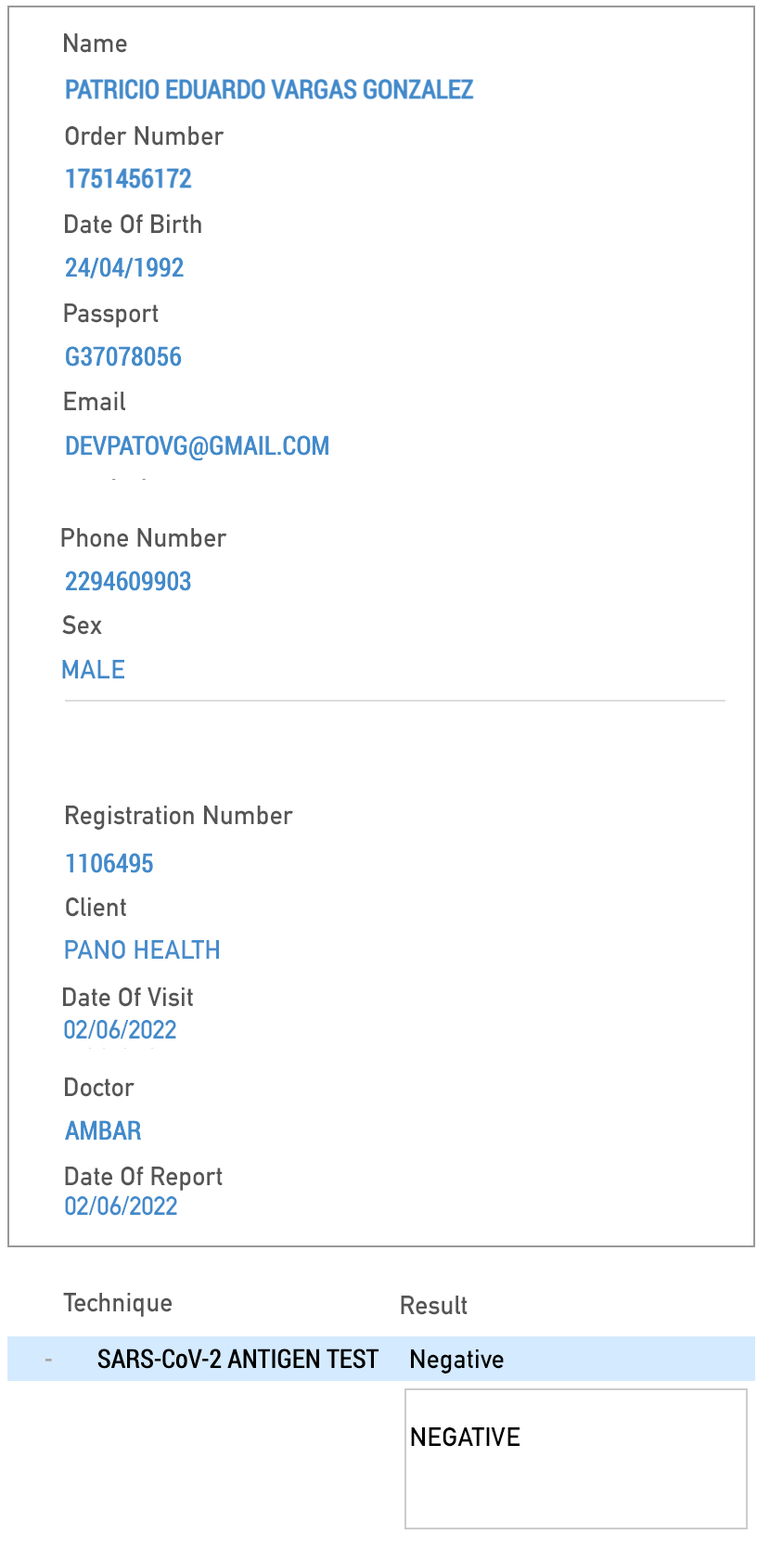
<style>
.page{position:relative;width:770px;height:1548px;background:#ffffff}
.page>*{position:absolute;margin:0}
.t1{font:26px "DINAlternate-Bold";color:#555555}
.t2{font:26px "DINAlternate-Bold";color:#428aca}
.t3{font:26px "DINAlternate-Bold";color:#458ccb}
.t4{font:26px "DINAlternate-Bold";color:#000000}
</style>
<div class="page">
<p class="t1" style="left:64px;top:33px;width:63px;height:20px">Name</p>
<p class="t1" style="left:65px;top:126px;width:160px;height:20px">Order Number</p>
<p class="t1" style="left:65px;top:214px;width:136px;height:20px">Date Of Birth</p>
<p class="t1" style="left:64px;top:303px;width:95px;height:25px">Passport</p>
<p class="t1" style="left:64px;top:392px;width:61px;height:19px">Email</p>
<p class="t1" style="left:61px;top:528px;width:166px;height:20px">Phone Number</p>
<p class="t1" style="left:62px;top:615px;width:40px;height:20px">Sex</p>
<p class="t2" style="left:62px;top:660px;width:62px;height:18px">MALE</p>
<p class="t1" style="left:66px;top:806px;width:227px;height:24px">Registration Number</p>
<p class="t1" style="left:66px;top:897px;width:60px;height:20px">Client</p>
<p class="t3" style="left:65px;top:940px;width:154px;height:20px">PANO HEALTH</p>
<p class="t1" style="left:63px;top:987px;width:130px;height:20px">Date Of Visit</p>
<p class="t2" style="left:64px;top:1019px;width:112px;height:20px">02/06/2022</p>
<p class="t1" style="left:65px;top:1077px;width:70px;height:20px">Doctor</p>
<p class="t1" style="left:65px;top:1167px;width:158px;height:24px">Date Of Report</p>
<p class="t2" style="left:65px;top:1195px;width:112px;height:21px">02/06/2022</p>
<p class="t1" style="left:63px;top:1293px;width:109px;height:24px">Technique</p>
<p class="t1" style="left:401px;top:1296px;width:67px;height:19px">Result</p>
<p class="t4" style="left:411px;top:1349px;width:93px;height:25px">Negative</p>
<p class="t4" style="left:411px;top:1427px;width:109px;height:20px">NEGATIVE</p>
</div>
